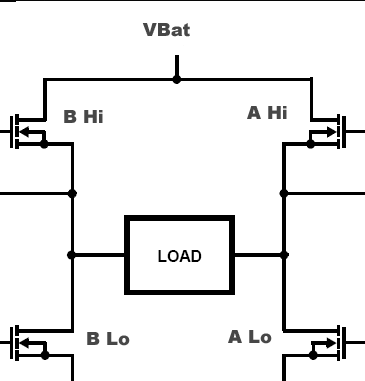
<style>
.page{position:relative;width:365px;height:381px;background:#ffffff}
.page>*{position:absolute;margin:0}
.t1{font:17.9px "Arial-Black";color:#474747}
</style>
<div class="page">
<p class="t1" style="left:142px;top:22px;width:48px;height:14px">VBat</p>
<p class="t1" style="left:64px;top:109px;width:39px;height:13px">B Hi</p>
<p class="t1" style="left:247px;top:105px;width:40px;height:13px">A Hi</p>
<p class="t1" style="left:228px;top:329px;width:44px;height:14px">A Lo</p>
<p class="t1" style="left:87px;top:331px;width:43px;height:14px">B Lo</p>
</div>
